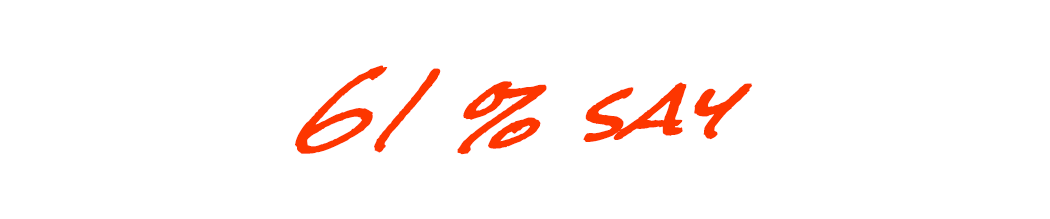
<style>
.page{position:relative;width:1050px;height:219px;background:#ffffff}
.page>*{position:absolute;margin:0}
.t1{font:73.3px "RockSalt";letter-spacing:0.02em;color:#fd3600;font-weight:bold;font-style:italic}
</style>
<div class="page">
<p class="t1" style="left:295px;top:65px;width:458px;height:90px">61 % say</p>
</div>
